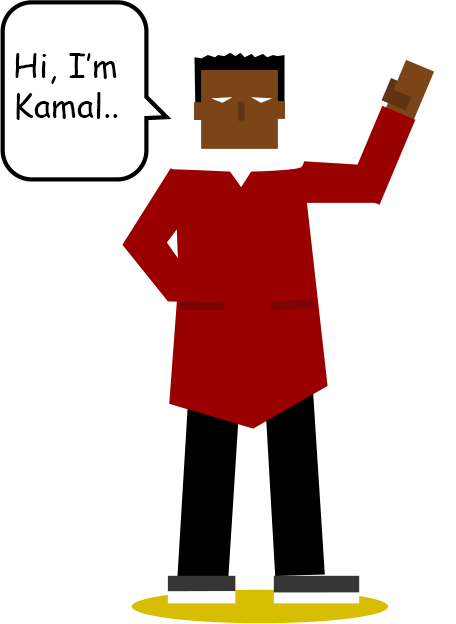
<style>
.page{position:relative;width:456px;height:624px;background:#ffffff}
.page>*{position:absolute;margin:0}
.t1{font:33.3px "ComicSansMS";color:#000000}
</style>
<div class="page">
<p class="t1" style="left:15px;top:53px;width:103px;height:67px">Hi, I’m <br>Kamal..</p>
</div>
